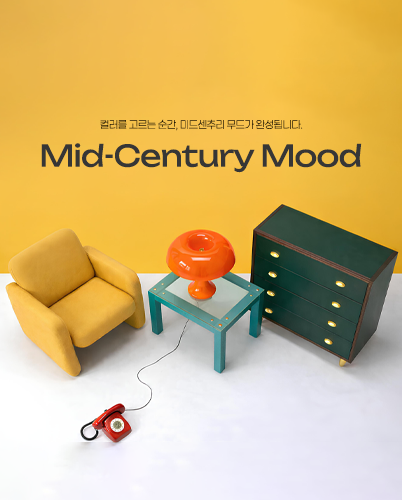
<style>
.page{position:relative;width:402px;height:500px}
.page>*{position:absolute;margin:0}
.t1{font:10.4px "Paperlogy-2ExtraLight";letter-spacing:-0.02em;color:#211804}
.t2{font:29.7px "Unbounded-Regular";letter-spacing:-0.02em;color:#363636}
</style>
<div class="page">
<p class="t1" style="left:100px;top:119px;width:203px;height:12px">컬러를 고르는 순간, 미드센추리 무드가 완성됩니다.</p>
<p class="t2" style="left:41px;top:143px;width:321px;height:30px">Mid-Century Mood</p>
</div>
